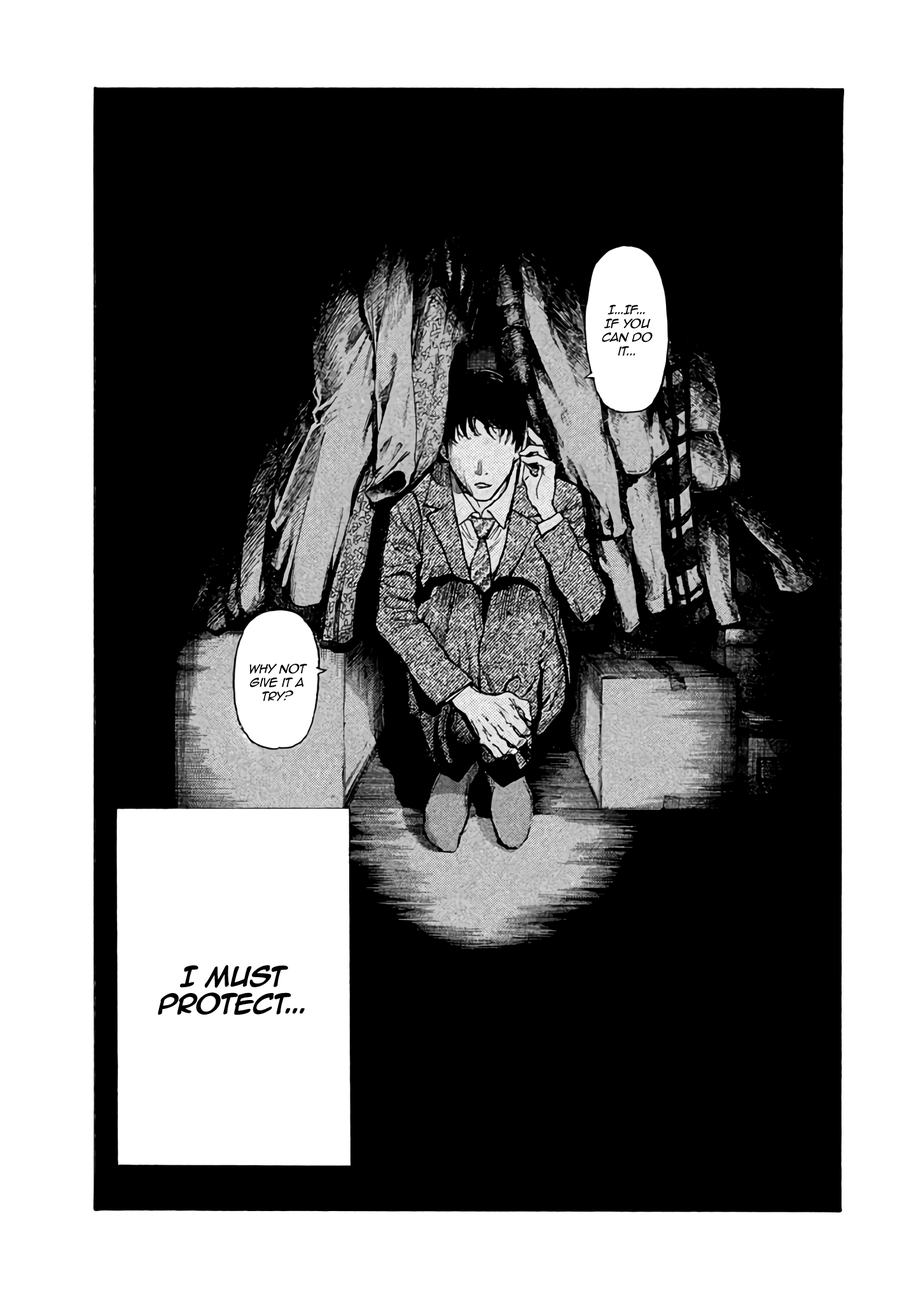
<style>
.page{position:relative;width:916px;height:1302px;background:#000000}
.page>*{position:absolute;margin:0}
.t1{font:11.4px "AnimeAce2.0BB-Italic";letter-spacing:-0.025em;color:#000000}
.t2{font:22.9px "AnimeAce2.0BB-Bold";letter-spacing:-0.025em;color:#000000}
</style>
<div class="page">
<p class="t1" style="left:602px;top:305px;width:50px;height:51px;text-align:center">I...If... <br>If you can do it...</p>
<p class="t1" style="left:249px;top:664px;width:58px;height:37px;text-align:center">Why not give it a try?</p>
<p class="t2" style="left:158px;top:965px;width:147px;height:50px;text-align:center">I Must protect...</p>
</div>
